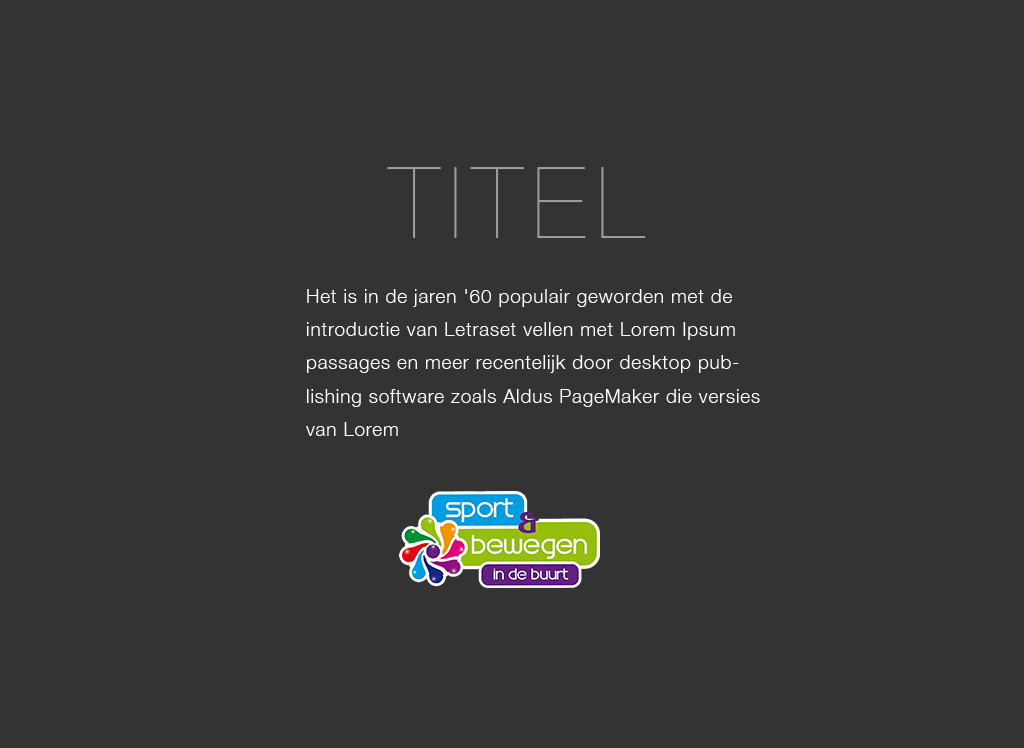
<style>
.page{position:relative;width:1024px;height:748px;background:#333333}
.page>*{position:absolute;margin:0}
.t1{font:100px "HelveticaNeue-UltraLight";letter-spacing:0.1em;color:#9d9d9d;text-transform:uppercase}
.t2{font:18.8px/33.3px "HelveticaNeue-Light";letter-spacing:0.05em;color:#ffffff}
</style>
<div class="page">
<p class="t1" style="left:387px;top:167px;width:259px;height:71px">TITEL</p>
<p class="t2" style="left:305px;top:289px;width:455px;height:147px">Het is in de jaren '60 populair geworden met de introductie van Letraset vellen met Lorem Ipsum passages en meer recentelijk door desktop publishing software zoals Aldus PageMaker die versies van Lorem</p>
</div>
